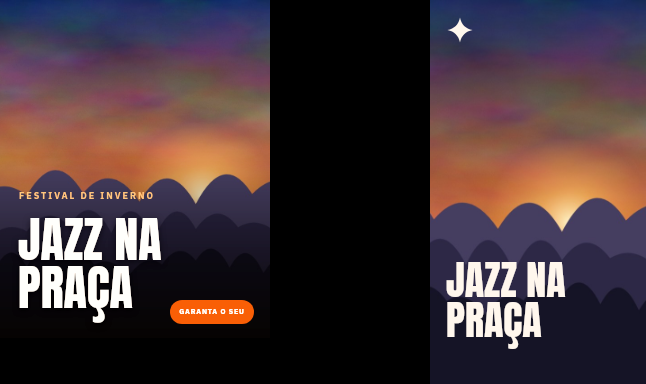
<style>
.page{position:relative;width:646px;height:384px;background:#000000}
.page>*{position:absolute;margin:0}
.t1{font:9px/10.8px "IBMPlexSans-Bold";letter-spacing:0.22em;color:#fdba74}
.t2{font:48px/47px "Anton-Regular";color:#fff7ed}
.t3{font:40px/39.2px "Anton-Regular";color:#fff7ed}
.t4{font:7px/8.4px "IBMPlexSans-Bold";letter-spacing:0.12em;color:#ffffff}
</style>
<div class="page">
<p class="t1" style="left:15px;top:187px;width:236px;height:20px">FESTIVAL DE INVERNO</p>
<p class="t2" style="left:15px;top:201px;width:240px;height:125px">JAZZ NA<br>PRAÇA</p>
<p class="t3" style="left:443px;top:247px;width:190px;height:106px">JAZZ NA<br>PRAÇA</p>
<p class="t4" style="left:167px;top:304px;width:90px;height:16px;text-align:center">GARANTA O SEU</p>
</div>
